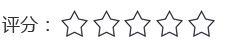
<style>
.page{position:relative;width:229px;height:46px;background:#ffffff}
.page>*{position:absolute;margin:0}
.t1{font:18px "MicrosoftYaHei";letter-spacing:0.02em;color:#303030}
</style>
<div class="page">
<p class="t1" style="left:2px;top:16px;width:47px;height:17px">评分：</p>
</div>
